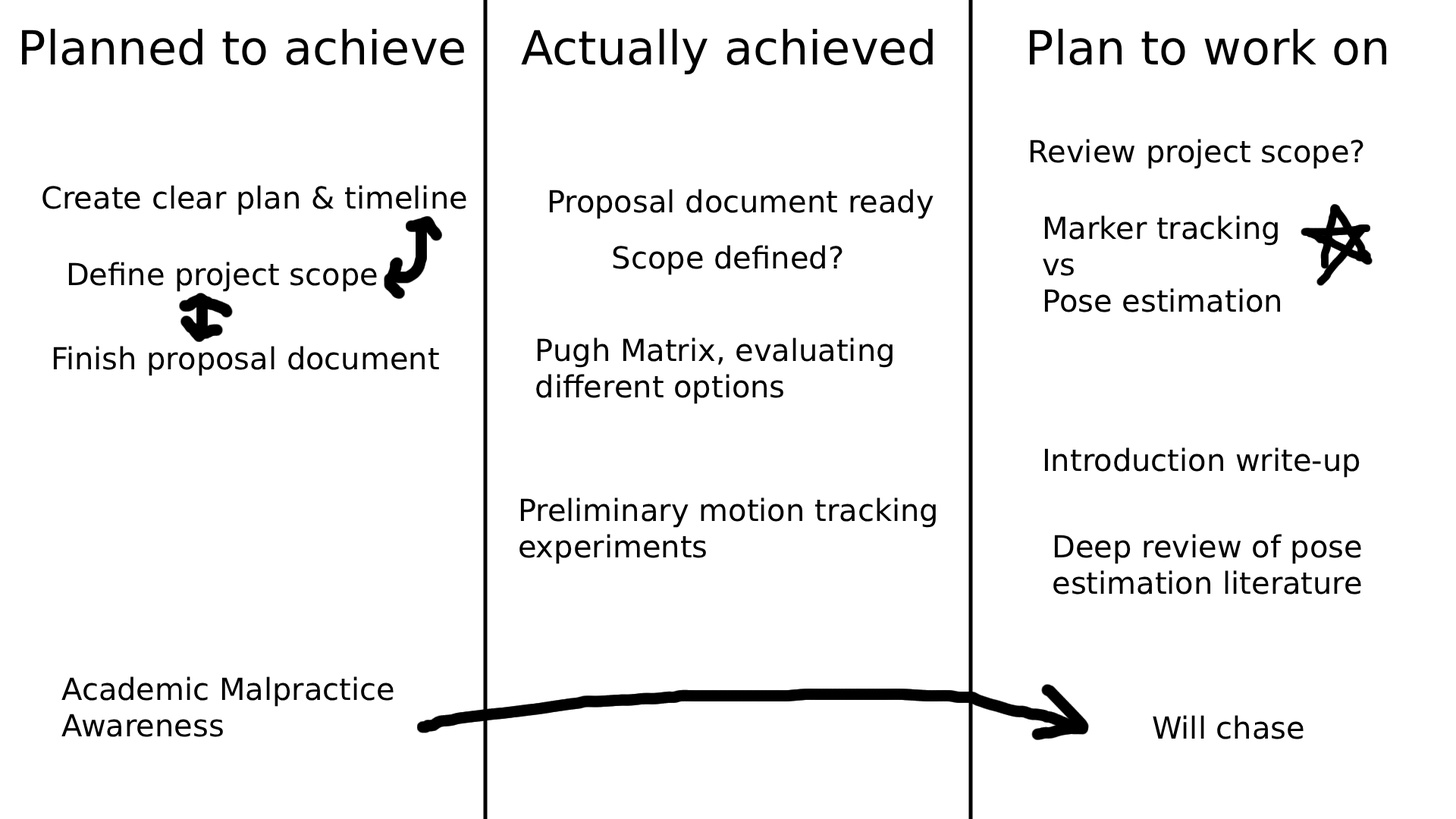
<style>
.page{position:relative;width:1456px;height:819px;background:#ffffff}
.page>*{position:absolute;margin:0}
.t1{font:47px "DejaVuSans";color:#000000}
.t2{font:30.3px "DejaVuSans";color:#000000}
</style>
<div class="page">
<p class="t1" style="left:22px;top:28px;width:442px;height:37px">Planned to achieve</p>
<p class="t1" style="left:521px;top:28px;width:412px;height:46px">Actually achieved</p>
<p class="t1" style="left:1030px;top:28px;width:357px;height:37px">Plan to work on</p>
<p class="t2" style="left:1030px;top:139px;width:333px;height:30px">Review project scope?</p>
<p class="t2" style="left:42px;top:185px;width:424px;height:30px">Create clear plan &amp; timeline</p>
<p class="t2" style="left:549px;top:189px;width:384px;height:30px">Proposal document ready</p>
<p class="t2" style="left:1043px;top:215px;width:237px;height:97px">Marker tracking<br>vs<br>Pose estimation</p>
<p class="t2" style="left:613px;top:245px;width:229px;height:30px">Scope defined?</p>
<p class="t2" style="left:68px;top:262px;width:309px;height:30px">Define project scope</p>
<p class="t2" style="left:536px;top:337px;width:357px;height:67px">Pugh Matrix, evaluating<br>different options</p>
<p class="t2" style="left:53px;top:346px;width:386px;height:30px">Finish proposal document</p>
<p class="t2" style="left:1044px;top:447px;width:316px;height:31px">Introduction write-up</p>
<p class="t2" style="left:519px;top:497px;width:417px;height:67px">Preliminary motion tracking<br>experiments</p>
<p class="t2" style="left:1053px;top:534px;width:308px;height:61px">Deep review of pose<br>estimation literature</p>
<p class="t2" style="left:61px;top:676px;width:333px;height:61px">Academic Malpractice<br>Awareness</p>
<p class="t2" style="left:1153px;top:715px;width:151px;height:24px">Will chase</p>
</div>
